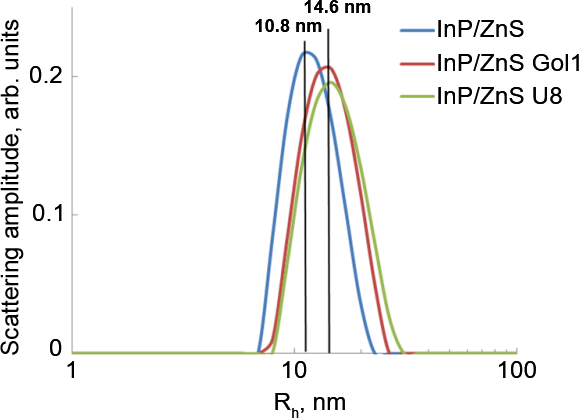
<style>
.page{position:relative;width:579px;height:418px;background:#ffffff}
.page>*{position:absolute;margin:0}
.t1{font:18.3px "Arial-BoldMT";color:#000000}
.t2{font:24.4px "ArialMT";color:#000000}
</style>
<div class="page">
<p class="t1" style="left:304px;top:0px;width:67px;height:13px">14.6 nm</p>
<p class="t2" style="left:0px;top:19px;width:24px;height:336px;rotate:-90deg">Scattering amplitude, arb. units</p>
<p class="t1" style="left:255px;top:19px;width:67px;height:13px">10.8 nm</p>
<p class="t2" style="left:438px;top:20px;width:141px;height:84px">InP/ZnS<br>InP/ZnS Gol1<br>InP/ZnS U8</p>
<p class="t2" style="left:30px;top:66px;width:32px;height:17px">0.2</p>
<p class="t2" style="left:33px;top:204px;width:29px;height:17px">0.1</p>
<p class="t2" style="left:50px;top:339px;width:12px;height:17px">0</p>
<p class="t2" style="left:67px;top:361px;width:7px;height:17px">1</p>
<p class="t2" style="left:283px;top:361px;width:24px;height:17px">10</p>
<p class="t2" style="left:499px;top:361px;width:37px;height:17px">100</p>
<p class="t2" style="left:275px;top:393px;width:70px;height:25px">Rh, nm</p>
</div>
